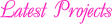
<style>
.page{position:relative;width:112px;height:24px;background:#ffffff}
.page>*{position:absolute;margin:0}
.t1{font:24px "UkrainianDecor";color:#fc24bc}
</style>
<div class="page">
<p class="t1" style="left:0px;top:0px;width:112px;height:24px">Latest Projects</p>
</div>
